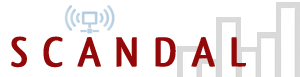
<style>
.page{position:relative;width:300px;height:77px;background:#ffffff}
.page>*{position:absolute;margin:0}
.t1{font:43.4px "QlassikMedium";letter-spacing:0.315em;color:#930808;font-weight:bold}
</style>
<div class="page">
<p class="t1" style="left:11px;top:36px;width:235px;height:32px">SCANDAL</p>
</div>
